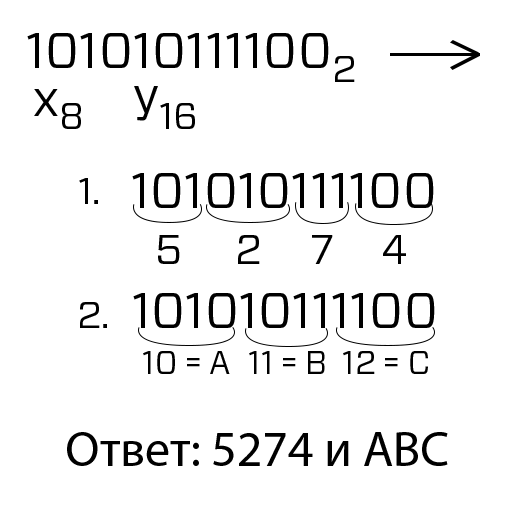
<style>
.page{position:relative;width:512px;height:512px;background:#ffffff}
.page>*{position:absolute;margin:0}
.t1{font:50px "Forza-Book";color:#000000}
.t2{font:37.5px "Forza-Book";color:#000000}
.t3{font:41.7px "Forza-Book";color:#000000}
.t4{font:32.9px "Forza-Book";color:#000000}
.t5{font:32.5px "Forza-Book";color:#000000}
.t6{font:33px "Forza-Book";color:#000000}
.t7{font:50px "MyriadPro-Regular";color:#000000}
</style>
<div class="page">
<p class="t1" style="left:27px;top:33px;width:302px;height:35px">101010111100</p>
<p class="t2" style="left:335px;top:56px;width:20px;height:26px">2</p>
<p class="t1" style="left:34px;top:89px;width:24px;height:27px">x</p>
<p class="t1" style="left:134px;top:86px;width:24px;height:35px">y</p>
<p class="t2" style="left:62px;top:103px;width:19px;height:26px">8</p>
<p class="t2" style="left:160px;top:103px;width:35px;height:26px">16</p>
<p class="t1" style="left:132px;top:173px;width:302px;height:35px">101010111100</p>
<p class="t2" style="left:79px;top:178px;width:19px;height:26px">1.</p>
<p class="t3" style="left:158px;top:235px;width:22px;height:29px">5</p>
<p class="t3" style="left:238px;top:235px;width:22px;height:29px">2</p>
<p class="t3" style="left:312px;top:235px;width:21px;height:29px">7</p>
<p class="t3" style="left:383px;top:235px;width:23px;height:29px">4</p>
<p class="t1" style="left:133px;top:293px;width:302px;height:35px">101010111100</p>
<p class="t2" style="left:80px;top:302px;width:27px;height:26px">2.</p>
<p class="t4" style="left:143px;top:351px;width:87px;height:23px">10 = A</p>
<p class="t5" style="left:249px;top:351px;width:76px;height:23px">11 = B</p>
<p class="t6" style="left:343px;top:351px;width:85px;height:23px">12 = C</p>
<p class="t7" style="left:67px;top:432px;width:381px;height:34px">Ответ: 5274 и ABC</p>
</div>
